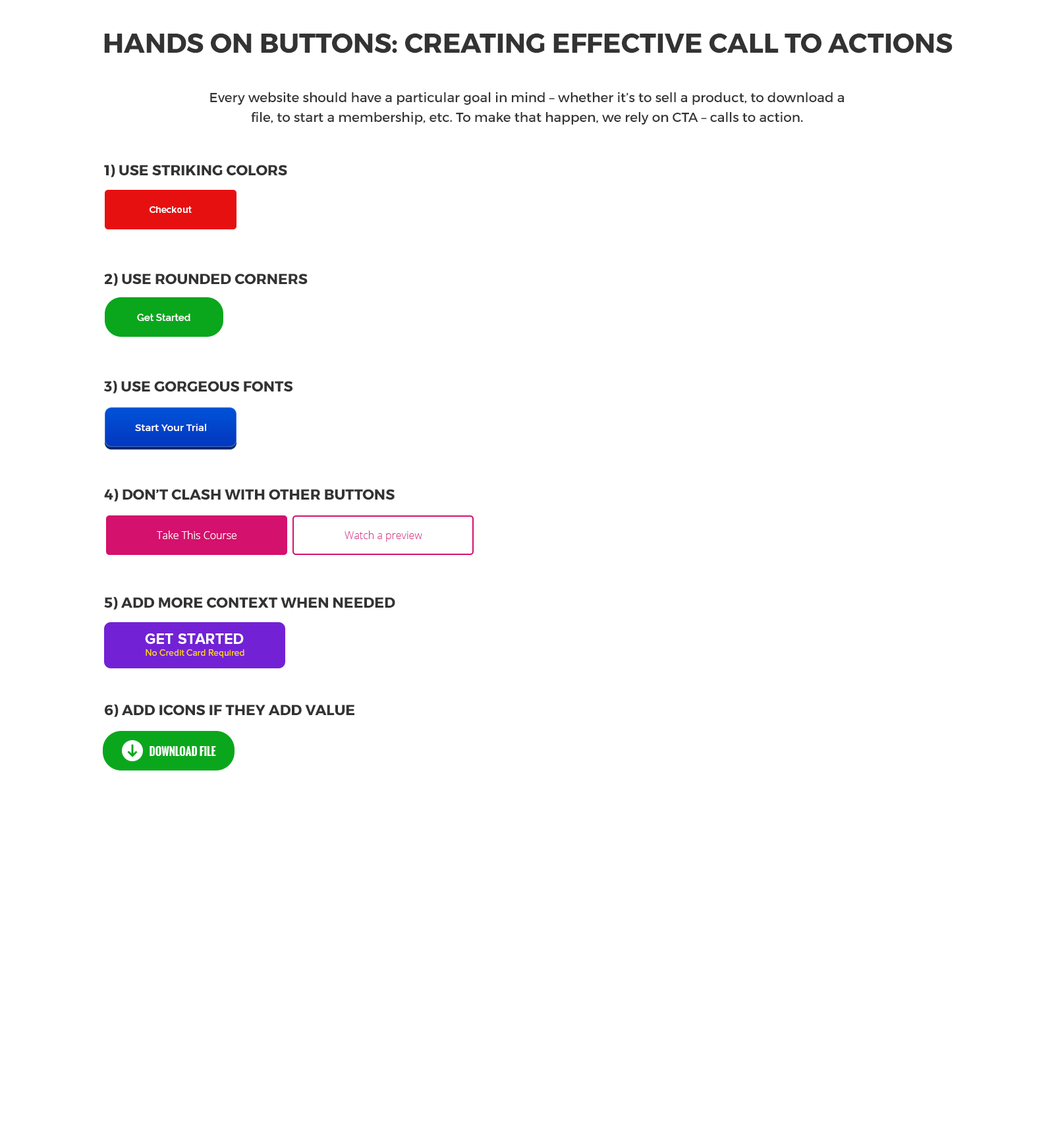
<style>
.page{position:relative;width:1054px;height:1131px;background:#ffffff}
.page>*{position:absolute;margin:0}
.t1{font:27px "Montserrat-Bold";color:#333333;text-transform:uppercase}
.t2{font:13.2px/19.8px "Montserrat-Regular";color:#333333}
.t3{font:14.5px "Montserrat-Bold";color:#333333;text-transform:uppercase}
.t4{font:9.9px "ProximaNova-Semibold";color:#ffffff}
.t5{font:9.9px "Raleway-SemiBold";color:#ffffff}
.t6{font:9.9px "Montserrat-Regular";color:#ffffff}
.t7{font:10.5px "OpenSans-Light";color:#ffffff}
.t8{font:10.5px "OpenSans-Light";color:#da388c}
.t9{font:15.2px "ProximaNova-Bold";letter-spacing:0.01em;color:#ffffff;text-transform:uppercase}
.t10{font:9.2px "ProximaNova-Regular";color:#ffd200}
.t11{font:10.5px "Oswald-Bold";color:#ffffff;text-transform:uppercase}
</style>
<div class="page">
<p class="t1" style="left:104px;top:33px;width:849px;height:20px">Hands on buttons: creating effective call to actions</p>
<p class="t2" style="left:210px;top:92px;width:634px;height:33px;text-align:center">Every website should have a particular goal in mind – whether it’s to sell a product, to download a file, to start a membership, etc. To make that happen, we rely on CTA – calls to action.</p>
<p class="t3" style="left:104px;top:164px;width:183px;height:13px">1) Use striking colors</p>
<p class="t4" style="left:150px;top:206px;width:42px;height:7px">Checkout</p>
<p class="t3" style="left:104px;top:273px;width:204px;height:13px">2) Use rounded corners</p>
<p class="t5" style="left:137px;top:314px;width:53px;height:7px">Get Started</p>
<p class="t3" style="left:104px;top:380px;width:189px;height:13px">3) Use gorgeous fonts</p>
<p class="t6" style="left:135px;top:424px;width:71px;height:7px">Start Your Trial</p>
<p class="t3" style="left:104px;top:488px;width:291px;height:14px">4) Don’t clash with other buttons</p>
<p class="t7" style="left:157px;top:531px;width:80px;height:8px">Take This Course</p>
<p class="t8" style="left:345px;top:531px;width:77px;height:11px">Watch a preview</p>
<p class="t3" style="left:104px;top:596px;width:291px;height:14px">5) Add more context when needed</p>
<p class="t9" style="left:145px;top:633px;width:99px;height:11px">Get Started</p>
<p class="t10" style="left:146px;top:649px;width:98px;height:9px">No Credit Card Required</p>
<p class="t3" style="left:105px;top:704px;width:250px;height:13px">6) Add icons if they add value</p>
<p class="t11" style="left:150px;top:746px;width:66px;height:10px">Download File</p>
</div>
